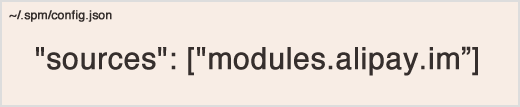
<style>
.page{position:relative;width:520px;height:107px;background:#f8ede5}
.page>*{position:absolute;margin:0}
.t1{font:12px "Helvetica";color:#362f2d;font-weight:bold}
.t2{font:30px "Helvetica";color:#362f2d;font-weight:bold}
</style>
<div class="page">
<p class="t1" style="left:9px;top:10px;width:103px;height:12px">~/.spm/config.json</p>
<p class="t2" style="left:36px;top:46px;width:442px;height:30px">"sources": ["modules.alipay.im”]</p>
</div>
